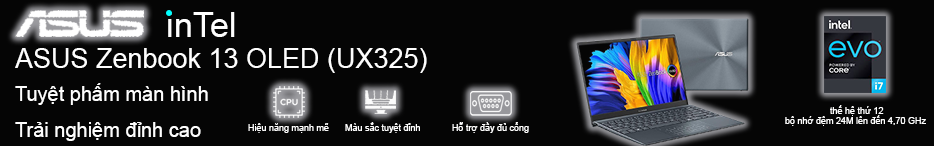
<style>
.page{position:relative;width:934px;height:146px;background:#050505}
.page>*{position:absolute;margin:0}
.t1{font:34.3px "ArialMT";color:#fefefe}
.t2{font:27px "ArialMT";color:#fefefe}
.t3{font:20px/36px "ArialMT";color:#fefefe}
.t4{font:9px/10px "ArialMT";color:#ffffff}
.t5{font:9px/36px "ArialMT";color:#ffffff}
.t6{font:9px "ArialMT";color:#ffffff}
</style>
<div class="page">
<p class="t1" style="left:168px;top:12px;width:67px;height:25px">inTel</p>
<p class="t2" style="left:15px;top:48px;width:412px;height:25px">ASUS Zenbook 13 OLED (UX325)</p>
<p class="t3" style="left:15px;top:83px;width:193px;height:58px">Tuyệt phẩm màn hình<br>Trải nghiệm đỉnh cao</p>
<p class="t4" style="left:785px;top:105px;width:141px;height:21px"><span class="t5">                  t</span>hế hệ thứ 12<br>bộ nhớ đệm 24M lên đến 4,70 GHz</p>
<p class="t6" style="left:248px;top:123px;width:81px;height:10px">Hiệu năng mạnh mẽ</p>
<p class="t6" style="left:345px;top:122px;width:75px;height:11px">Màu sắc tuyệt đỉnh</p>
<p class="t6" style="left:452px;top:122px;width:77px;height:11px">Hỗ trợ đầy đủ cổng</p>
</div>
